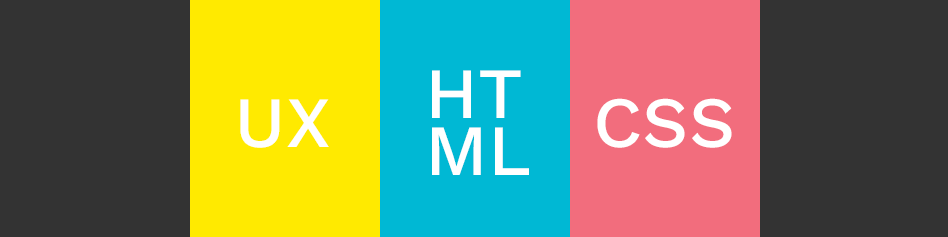
<style>
.page{position:relative;width:948px;height:237px;background:#333333}
.page>*{position:absolute;margin:0}
.t1{font:72px "WorkSans-Medium";color:#ffffff}
</style>
<div class="page">
<p class="t1" style="left:432px;top:70px;width:89px;height:48px">HT</p>
<p class="t1" style="left:240px;top:99px;width:89px;height:49px">UX</p>
<p class="t1" style="left:597px;top:98px;width:135px;height:50px">CSS</p>
<p class="t1" style="left:432px;top:127px;width:97px;height:48px">ML</p>
</div>
